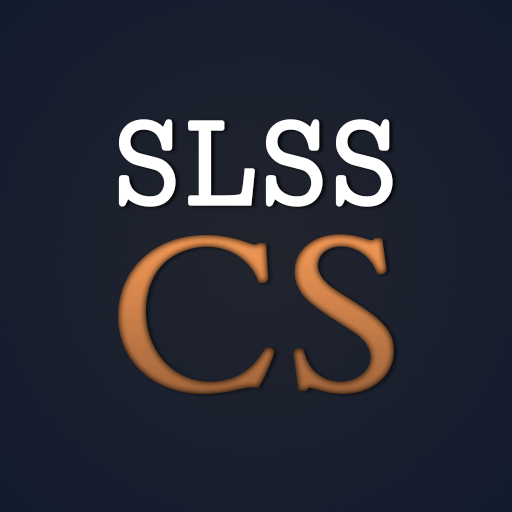
<style>
.page{position:relative;width:512px;height:512px}
.page>*{position:absolute;margin:0}
.t1{font:120px "CMUConcrete-Roman";color:#ffffff;font-weight:bold}
.t2{font:220px "BergamoPro-Regular";font-weight:bold}
</style>
<div class="page">
<p class="t1" style="left:118px;top:119px;width:275px;height:88px">SLSS</p>
<p class="t2" style="left:118px;top:234px;width:276px;height:160px">CS</p>
</div>
